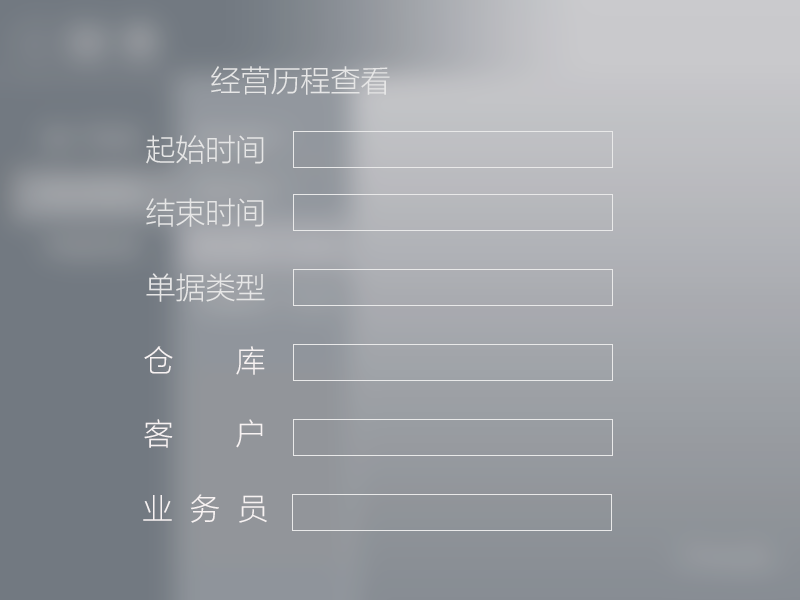
<style>
.page{position:relative;width:800px;height:600px}
.page>*{position:absolute;margin:0}
.t1{font:30px "MicrosoftYaHeiLight";color:#e6e6e6}
.t2{font:30px "MicrosoftYaHeiLight";color:#f7f2f2}
</style>
<div class="page">
<p class="t1" style="left:211px;top:66px;width:179px;height:29px">经营历程查看</p>
<p class="t1" style="left:146px;top:135px;width:118px;height:29px">起始时间</p>
<p class="t1" style="left:146px;top:198px;width:118px;height:29px">结束时间</p>
<p class="t1" style="left:146px;top:273px;width:119px;height:29px">单据类型</p>
<p class="t2" style="left:144px;top:346px;width:121px;height:29px">仓       库</p>
<p class="t2" style="left:144px;top:419px;width:119px;height:29px">客       户</p>
<p class="t2" style="left:143px;top:494px;width:124px;height:29px">业  务  员</p>
</div>
